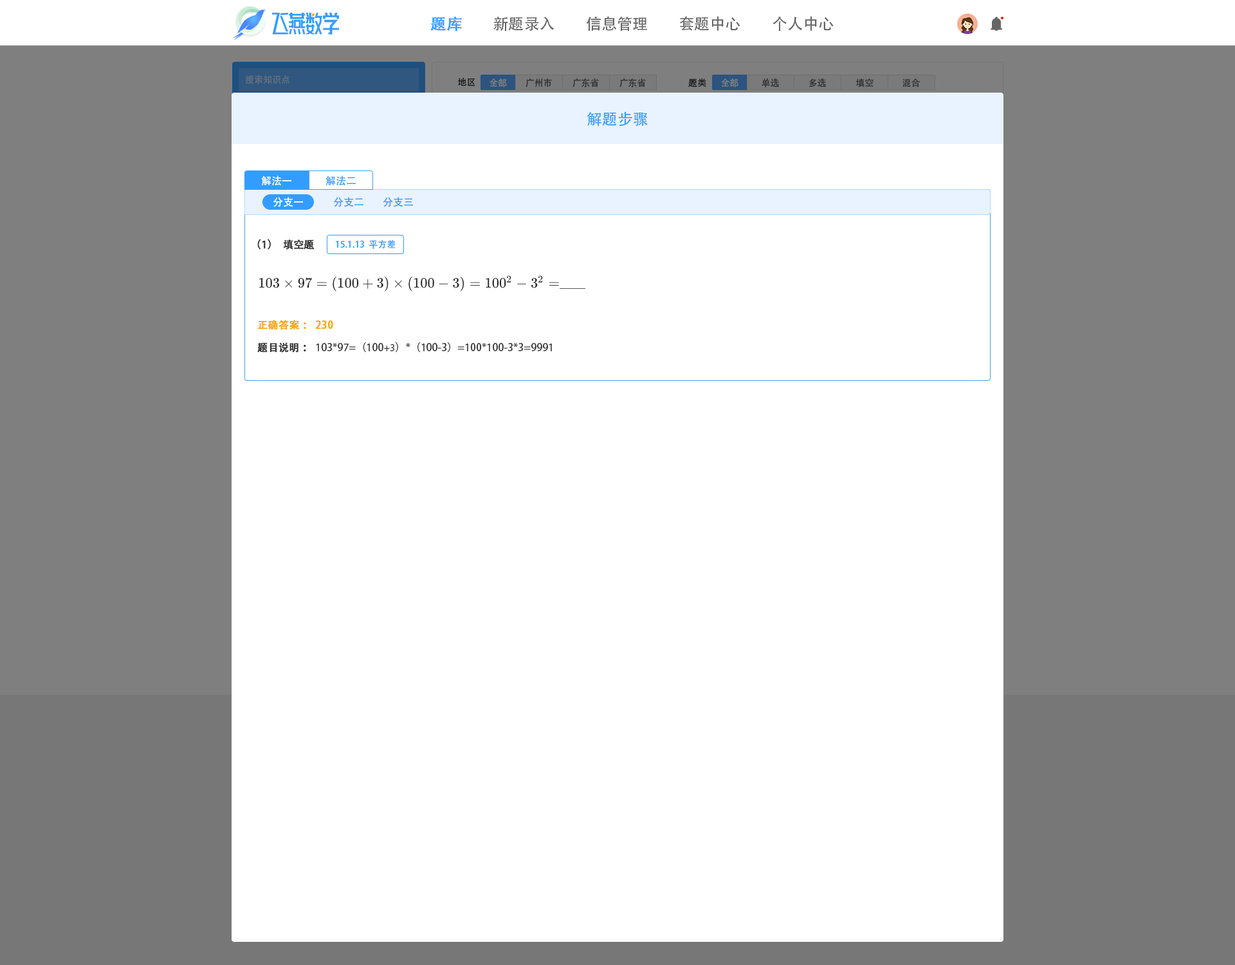
<style>
.page{position:relative;width:1235px;height:965px;background:#ffffff}
.page>*{position:absolute;margin:0}
.t1{font:15.4px "AdobeHeitiStd-Regular";color:#409eff;font-weight:bold}
.t2{font:15.4px "AdobeHeitiStd-Regular";color:#666666}
.t3{font:9px "AdobeHeitiStd-Regular";color:#61707f}
.t4{font:9px "AdobeHeitiStd-Regular";color:#191919}
.t5{font:9px "AdobeHeitiStd-Regular";color:#333333}
.t6{font:9px "AdobeHeitiStd-Regular";color:#7f7f7f}
.t7{font:15.4px "AdobeHeitiStd-Regular";color:#339dff}
.t8{font:10.3px "AdobeHeitiStd-Regular";color:#ffffff}
.t9{font:10.3px "AdobeHeitiStd-Regular";color:#339dff}
.t10{font:10.3px "AdobeHeitiStd-Regular";color:#333333;font-weight:bold}
.t11{font:9px "AdobeHeitiStd-Regular";color:#339dff}
.t12{font:10.3px "AdobeHeitiStd-Regular";color:#fea300;font-weight:bold}
.t13{font:10.3px "AdobeHeitiStd-Regular";color:#333333}
.t14{font:10.3px "MyriadPro-Regular";color:#333333}
</style>
<div class="page">
<p class="t1" style="left:430px;top:17px;width:32px;height:15px">题库</p>
<p class="t2" style="left:494px;top:17px;width:61px;height:14px">新题录入</p>
<p class="t2" style="left:586px;top:16px;width:61px;height:16px">信息管理</p>
<p class="t2" style="left:680px;top:16px;width:61px;height:15px">套题中心</p>
<p class="t2" style="left:773px;top:16px;width:61px;height:15px">个人中心</p>
<p class="t3" style="left:245px;top:75px;width:45px;height:9px">搜索知识点</p>
<p class="t4" style="left:458px;top:78px;width:18px;height:8px">地区</p>
<p class="t5" style="left:526px;top:78px;width:26px;height:10px">广州市</p>
<p class="t5" style="left:573px;top:78px;width:26px;height:10px">广东省</p>
<p class="t5" style="left:620px;top:78px;width:26px;height:10px">广东省</p>
<p class="t5" style="left:762px;top:78px;width:17px;height:10px">单选</p>
<p class="t5" style="left:809px;top:78px;width:17px;height:9px">多选</p>
<p class="t6" style="left:490px;top:79px;width:17px;height:9px">全部</p>
<p class="t4" style="left:689px;top:79px;width:18px;height:9px">题类</p>
<p class="t6" style="left:721px;top:79px;width:18px;height:9px">全部</p>
<p class="t5" style="left:856px;top:79px;width:18px;height:9px">填空</p>
<p class="t5" style="left:903px;top:79px;width:18px;height:9px">混合</p>
<p class="t7" style="left:587px;top:112px;width:61px;height:14px">解题步骤</p>
<p class="t8" style="left:261px;top:176px;width:30px;height:10px">解法一</p>
<p class="t9" style="left:326px;top:176px;width:30px;height:10px">解法二</p>
<p class="t8" style="left:273px;top:197px;width:30px;height:10px">分支一</p>
<p class="t9" style="left:333px;top:197px;width:31px;height:10px">分支二</p>
<p class="t9" style="left:383px;top:197px;width:30px;height:10px">分支三</p>
<p class="t10" style="left:257px;top:239px;width:58px;height:11px">（1）填空题</p>
<p class="t11" style="left:336px;top:240px;width:60px;height:9px">15.1.13  平方差</p>
<p class="t12" style="left:258px;top:320px;width:75px;height:10px">正确答案： 230</p>
<p class="t13" style="left:257px;top:342px;width:295px;height:11px"><span class="t10">题目说明：</span>103*97=（100<span class="t14">+3</span>）*（100-3）=100*100-3*3=9991</p>
</div>
